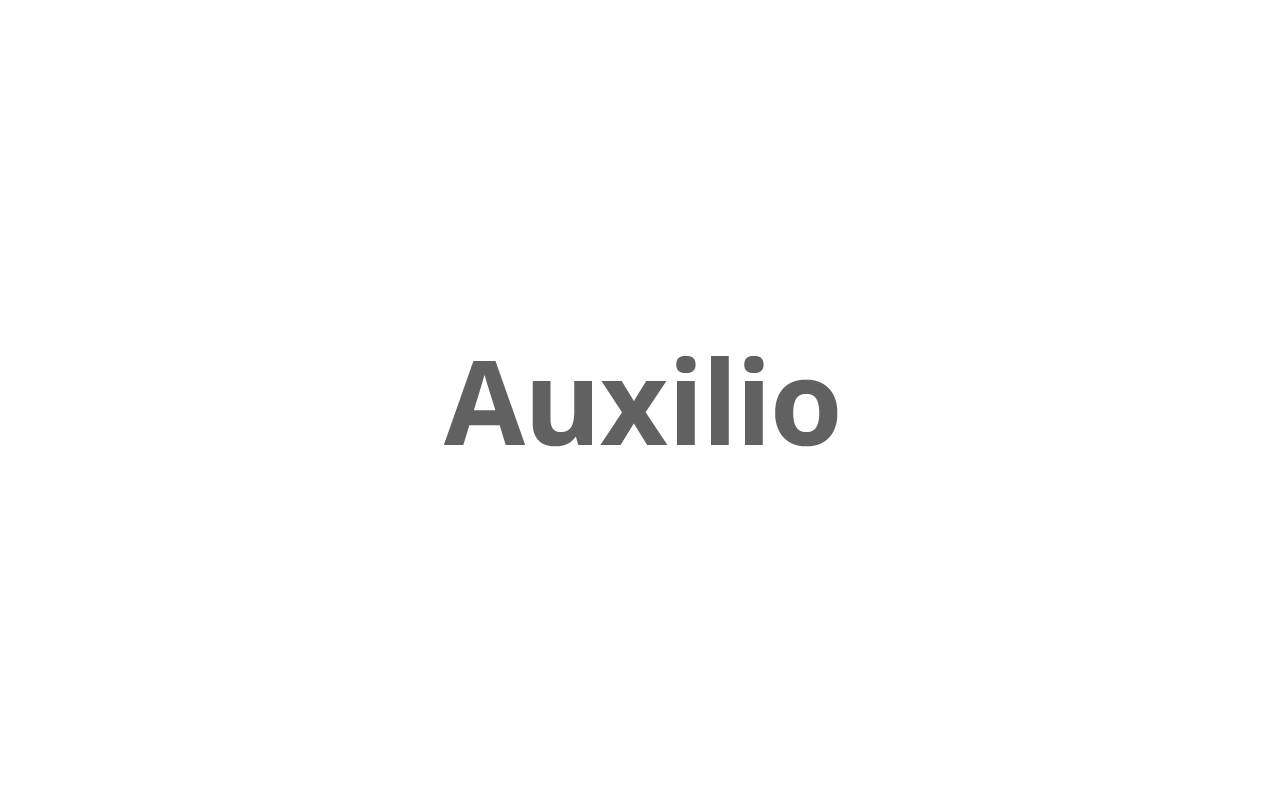
<style>
.page{position:relative;width:1280px;height:800px;background:#ffffff}
.page>*{position:absolute;margin:0}
.t1{font:117.2px "OpenSans-Bold";color:#616161}
</style>
<div class="page">
<p class="t1" style="left:444px;top:356px;width:394px;height:91px">Auxilio</p>
</div>
